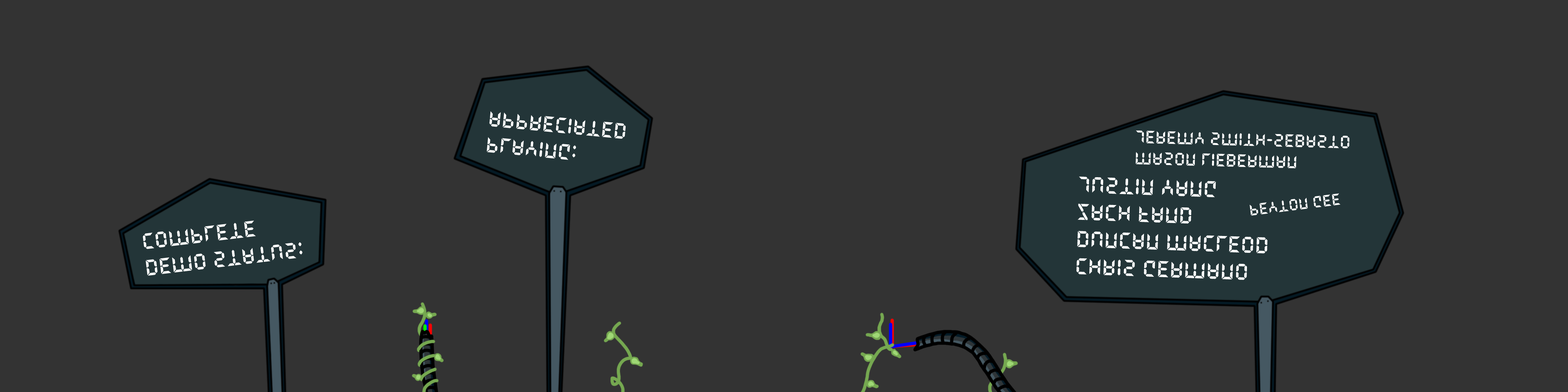
<style>
.page{position:relative;width:1568px;height:392px;background:#333333}
.page>*{position:absolute;margin:0}
.t1{font:21.7px "QuartzMS";color:#ffffff}
.t2{font:17.7px "QuartzMS";color:#ffffff}
.t3{font:22.7px "QuartzMS";color:#ffffff}
.t4{font:15.9px "QuartzMS";color:#ffffff}
.t5{font:22.2px "QuartzMS";color:#ffffff}
</style>
<div class="page">
<p class="t1" style="left:486px;top:111px;width:140px;height:49px;rotate:5deg">playing:<br>appreciated</p>
<p class="t2" style="left:1136px;top:130px;width:214px;height:39px;rotate:1deg">Mason lieberman<br>jeremy smith-sebasto</p>
<p class="t3" style="left:1076px;top:176px;width:192px;height:104px;rotate:2deg">Chris germano<br>Duncan macleod<br>zach fand<br>justin yang</p>
<p class="t4" style="left:1250px;top:193px;width:91px;height:23px;rotate:-7deg">peyton gee</p>
<p class="t5" style="left:143px;top:220px;width:160px;height:56px;rotate:-7deg">Demo status:<br>complete</p>
</div>
